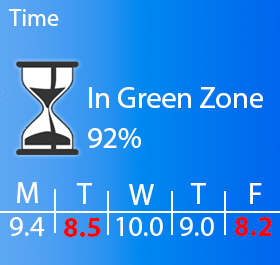
<style>
.page{position:relative;width:280px;height:265px}
.page>*{position:absolute;margin:0}
.t1{font:24px "MyriadHebrew-Regular";color:#ffffff}
.t2{font:30px "MyriadHebrew-Regular";color:#ffffff}
.t3{font:28px "MyriadHebrew-Regular";color:#ffffff}
.t4{font:28px "MyriadHebrew-Bold";color:#ff0000}
</style>
<div class="page">
<p class="t1" style="left:9px;top:9px;width:50px;height:17px">Time</p>
<p class="t2" style="left:89px;top:87px;width:174px;height:21px">In Green Zone</p>
<p class="t2" style="left:88px;top:128px;width:53px;height:21px">92%</p>
<p class="t2" style="left:17px;top:182px;width:21px;height:21px">M</p>
<p class="t2" style="left:76px;top:183px;width:16px;height:21px">T</p>
<p class="t2" style="left:129px;top:184px;width:25px;height:21px">W</p>
<p class="t2" style="left:190px;top:183px;width:16px;height:21px">T</p>
<p class="t2" style="left:250px;top:183px;width:12px;height:21px">F</p>
<p class="t3" style="left:10px;top:217px;width:35px;height:20px">9.4</p>
<p class="t4" style="left:64px;top:218px;width:37px;height:19px">8.5</p>
<p class="t3" style="left:116px;top:217px;width:47px;height:19px">10.0</p>
<p class="t3" style="left:180px;top:217px;width:34px;height:19px">9.0</p>
<p class="t4" style="left:235px;top:217px;width:37px;height:19px">8.2</p>
</div>
